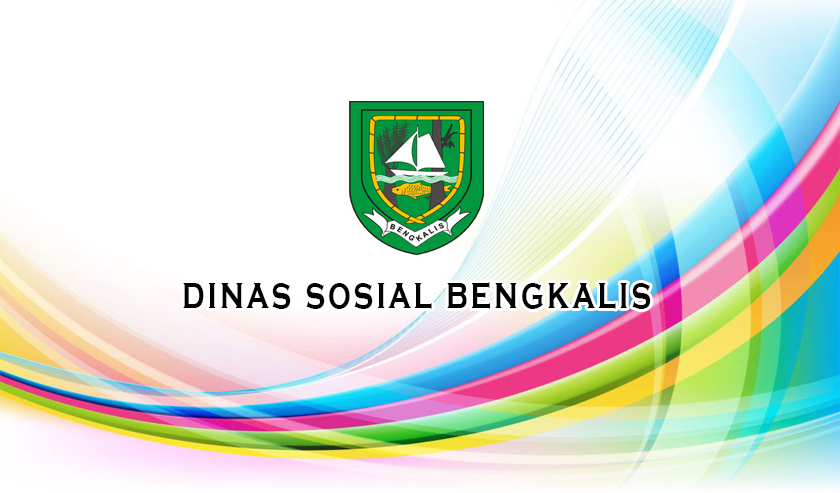
<style>
.page{position:relative;width:840px;height:493px;background:#ffffff}
.page>*{position:absolute;margin:0}
.t1{font:45.2px "CopperplateGothic-Bold";letter-spacing:0.1em;color:#030303;scale:0.7 1}
</style>
<div class="page">
<p class="t1" style="left:183px;top:282px;width:468px;height:27px">dinas sosial bengkalis</p>
</div>
